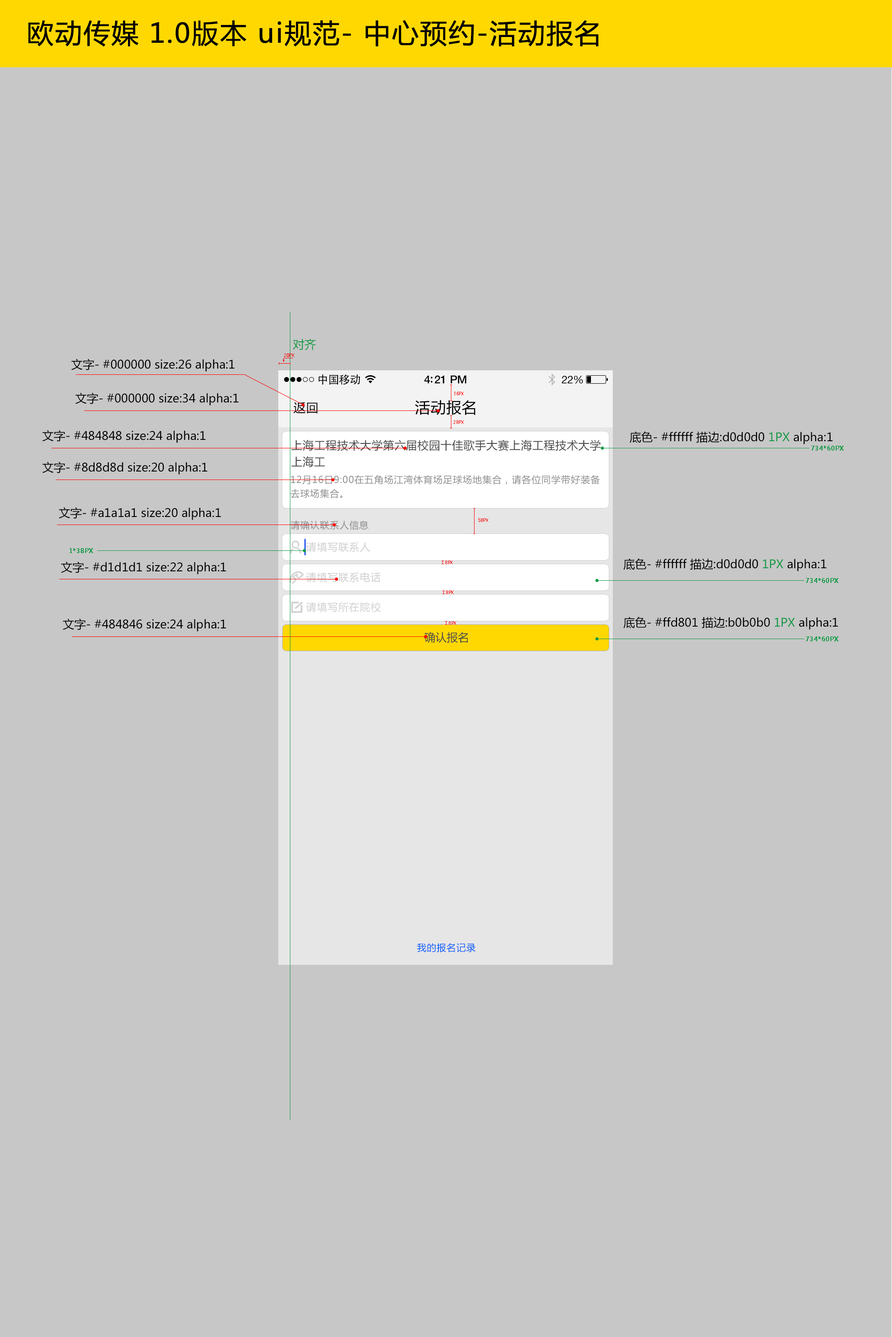
<style>
.page{position:relative;width:892px;height:1337px;background:#c7c7c7}
.page>*{position:absolute;margin:0}
.t1{font:26.7px "MicrosoftYaHei";letter-spacing:0.03em;color:#000000;font-weight:bold}
.t2{font:11.6px "MicrosoftYaHei";color:#119a45}
.t3{font:4.4px "MicrosoftYaHei";color:#fe0000;scale:0.96 1}
.t4{font:11.6px "MicrosoftYaHei";color:#000000}
.t5{font:6.7px "MicrosoftYaHei";color:#119a45;font-weight:bold;scale:0.96 1}
</style>
<div class="page">
<p class="t1" style="left:28px;top:20px;width:570px;height:27px">欧动传媒 1.0版本 ui规范- 中心预约-活动报名</p>
<p class="t2" style="left:293px;top:339px;width:23px;height:11px">对齐</p>
<p class="t3" style="left:284px;top:354px;width:10px;height:3px">20PX</p>
<p class="t4" style="left:71px;top:359px;width:163px;height:13px">文字- #000000 size:26 alpha:1</p>
<p class="t4" style="left:75px;top:393px;width:164px;height:13px">文字- #000000 size:34 alpha:1</p>
<p class="t3" style="left:454px;top:392px;width:10px;height:3px">36PX</p>
<p class="t3" style="left:453px;top:420px;width:11px;height:4px">28PX</p>
<p class="t4" style="left:42px;top:430px;width:164px;height:13px">文字- #484848 size:24 alpha:1</p>
<p class="t4" style="left:629px;top:432px;width:203px;height:12px">底色- #ffffff 描边:d0d0d0 <span class="t2">1PX</span> alpha:1</p>
<p class="t5" style="left:811px;top:446px;width:32px;height:5px">734*60PX</p>
<p class="t4" style="left:42px;top:462px;width:165px;height:13px">文字- #8d8d8d size:20 alpha:1</p>
<p class="t4" style="left:59px;top:507px;width:162px;height:13px">文字- #a1a1a1 size:20 alpha:1</p>
<p class="t3" style="left:478px;top:518px;width:10px;height:4px">58PX</p>
<p class="t5" style="left:70px;top:548px;width:23px;height:5px">1*38PX</p>
<p class="t4" style="left:61px;top:562px;width:165px;height:13px">文字- #d1d1d1 size:22 alpha:1</p>
<p class="t3" style="left:445px;top:561px;width:7px;height:3px">8PX</p>
<p class="t4" style="left:623px;top:559px;width:203px;height:13px">底色- #ffffff 描边:d0d0d0 <span class="t2">1PX</span> alpha:1</p>
<p class="t5" style="left:806px;top:578px;width:32px;height:5px">734*60PX</p>
<p class="t3" style="left:446px;top:591px;width:7px;height:3px">8PX</p>
<p class="t4" style="left:623px;top:617px;width:215px;height:13px">底色- #ffd801 描边:b0b0b0 <span class="t2">1PX</span> alpha:1</p>
<p class="t4" style="left:63px;top:619px;width:163px;height:13px">文字- #484846 size:24 alpha:1</p>
<p class="t3" style="left:448px;top:621px;width:8px;height:4px">8PX</p>
<p class="t5" style="left:806px;top:637px;width:32px;height:5px">734*60PX</p>
</div>
